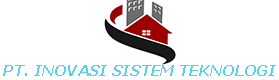
<style>
.page{position:relative;width:279px;height:80px;background:#ffffff}
.page>*{position:absolute;margin:0}
.t1{font:14.5px "Verdana-BoldItalic";color:#53d3f2}
</style>
<div class="page">
<p class="t1" style="left:3px;top:65px;width:273px;height:11px">PT. INOVASI SISTEM TEKNOLOGI</p>
</div>
